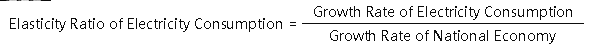
<style>
.page{position:relative;width:592px;height:51px;background:#ffffff}
.page>*{position:absolute;margin:0}
.t1{font:14px "MicrosoftYaHei";letter-spacing:-0.005em;color:#0d0d0d}
</style>
<div class="page">
<p class="t1" style="left:314px;top:6px;width:258px;height:14px">Growth Rate of Electricity Consumption</p>
<p class="t1" style="left:10px;top:18px;width:286px;height:14px">Elasticity Ratio of Electricity Consumption =</p>
<p class="t1" style="left:330px;top:30px;width:226px;height:14px">Growth Rate of National Economy</p>
</div>
